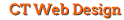
<style>
.page{position:relative;width:124px;height:20px;background:#ffffff}
.page>*{position:absolute;margin:0}
.t1{font:14.3px "Arvo";color:#fe5e08}
</style>
<div class="page">
<p class="t1" style="left:9px;top:3px;width:112px;height:15px">CT Web Design</p>
</div>
